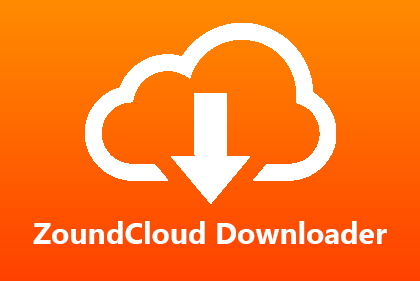
<style>
.page{position:relative;width:420px;height:281px}
.page>*{position:absolute;margin:0}
.t1{font:30px "NirmalaUI-Bold";color:#ffffff}
</style>
<div class="page">
<p class="t1" style="left:33px;top:221px;width:354px;height:23px">ZoundCloud Downloader</p>
</div>
